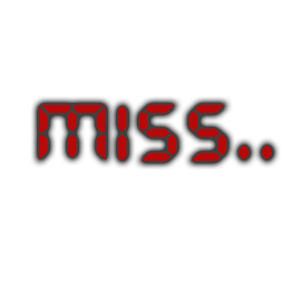
<style>
.page{position:relative;width:300px;height:300px;background:#ffffff}
.page>*{position:absolute;margin:0}
.t1{font:80px "QuartzMS";color:#b70909}
</style>
<div class="page">
<p class="t1" style="left:39px;top:105px;width:233px;height:56px">miss..</p>
</div>
